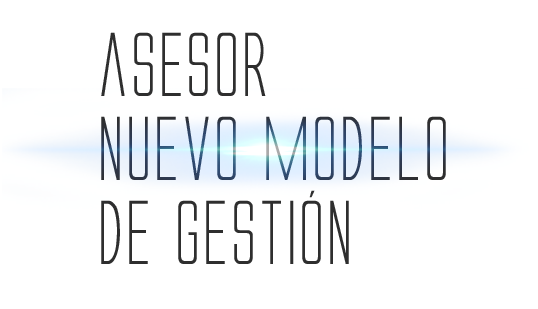
<style>
.page{position:relative;width:538px;height:309px;background:#ffffff}
.page>*{position:absolute;margin:0}
.t1{font:84px/84px "AlienLeagueII";color:#2e2e2e}
</style>
<div class="page">
<p class="t1" style="left:101px;top:32px;width:345px;height:232px">asesor <br>NUEVO MODELO <br>DE GESTión</p>
</div>
